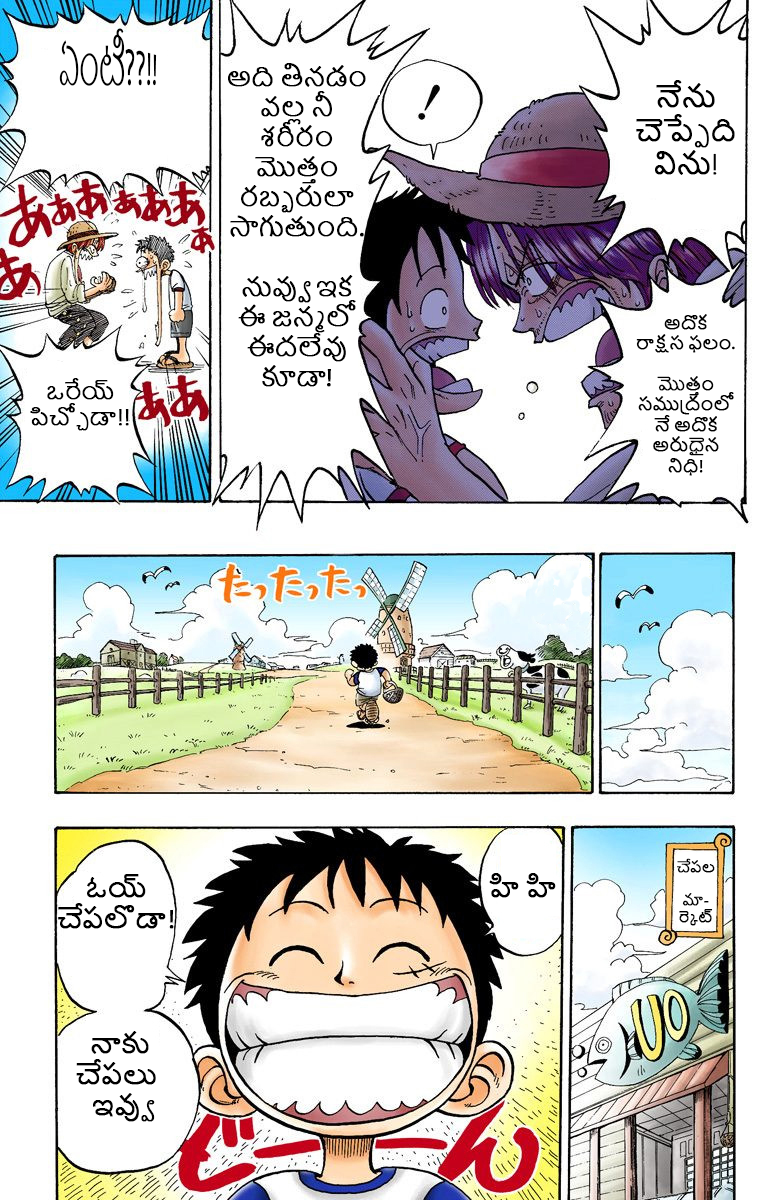
<style>
.page{position:relative;width:780px;height:1200px;background:#ffffff}
.page>*{position:absolute;margin:0}
.t1{font:25px "NirmalaUI";color:#000000}
.t2{font:25px "MyriadPro-Regular";color:#000000}
.t3{font:25px "NirmalaUI";color:#000000;font-weight:bold}
.t4{font:25px "MyriadPro-Regular";color:#000000;font-weight:bold}
.t5{font:28px "NirmalaUI";color:#000000;font-weight:bold}
.t6{font:28px "GeosansLight";color:#000000;font-weight:bold}
.t7{font:17px "NirmalaUI";color:#000000;font-weight:bold}
.t8{font:17px "MyriadPro-Regular";color:#000000;font-weight:bold}
.t9{font:22px "NirmalaUI";color:#000000;font-weight:bold}
.t10{font:14px "NirmalaUI";color:#000000;font-weight:bold}
.t11{font:26px "NirmalaUI";color:#000000;font-weight:bold}
</style>
<div class="page">
<p class="t1" style="left:59px;top:28px;width:98px;height:58px;text-align:center">ఏంటీ<span class="t2">??!!</span></p>
<p class="t3" style="left:228px;top:63px;width:138px;height:324px;text-align:center">అది తినడం వల్ల నీ శరీరం మొత్తం రబ్బరులా సాగుతుంది<span class="t4">. <br></span><br>నువ్వు   ఇక ఈ జన్మలో ఈదలేవు కూడా<span class="t4">!</span></p>
<p class="t5" style="left:636px;top:80px;width:99px;height:95px;text-align:center">నేను చెప్పేది విను<span class="t6">!</span></p>
<p class="t7" style="left:636px;top:314px;width:99px;height:162px;text-align:center">అదొక  రాక్షస ఫలం<span class="t8">.<br><br></span>మొత్తం సముద్రంలోనే అదొక అరుధైన నిధి!</p>
<p class="t9" style="left:30px;top:378px;width:99px;height:53px;text-align:center">ఒరేయ్ పిచ్చోడా!!</p>
<p class="t10" style="left:677px;top:858px;width:38px;height:68px;text-align:center">చేపల <br><br>మా-ర్కెట్</p>
<p class="t11" style="left:58px;top:874px;width:116px;height:248px;text-align:center">ఓయ్ చేపలొడా!<br><br><br><br> నాకు చేపలు ఇవ్వు</p>
<p class="t11" style="left:489px;top:873px;width:67px;height:25px">హి హి</p>
</div>
